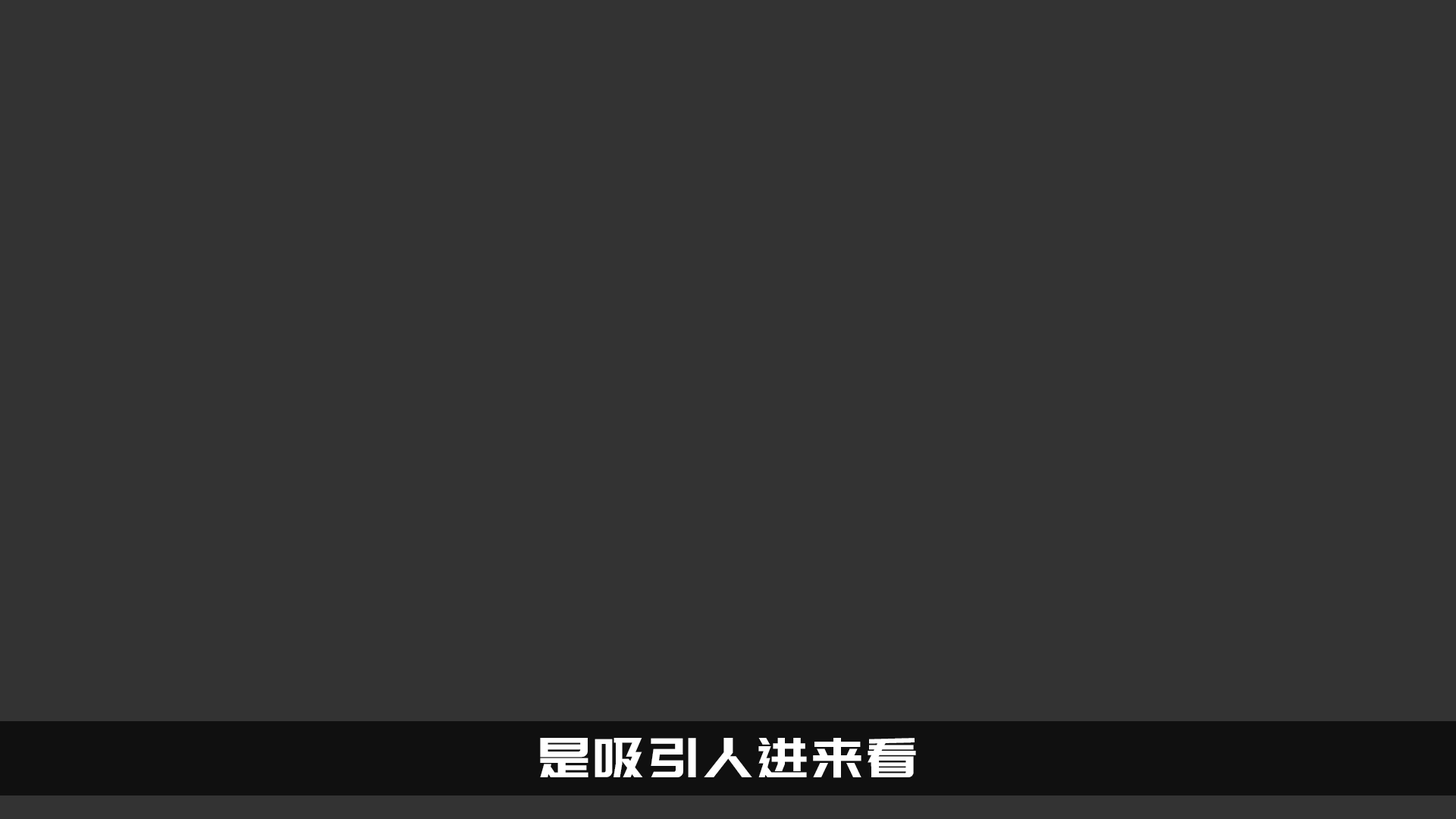
<style>
.page{position:relative;width:1456px;height:819px;background:#333333}
.page>*{position:absolute;margin:0}
.t1{font:54.6px "PangMenZhengDao-3";color:#ffffff}
</style>
<div class="page">
<p class="t1" style="left:540px;top:738px;width:376px;height:40px">是吸引人进来看</p>
</div>
